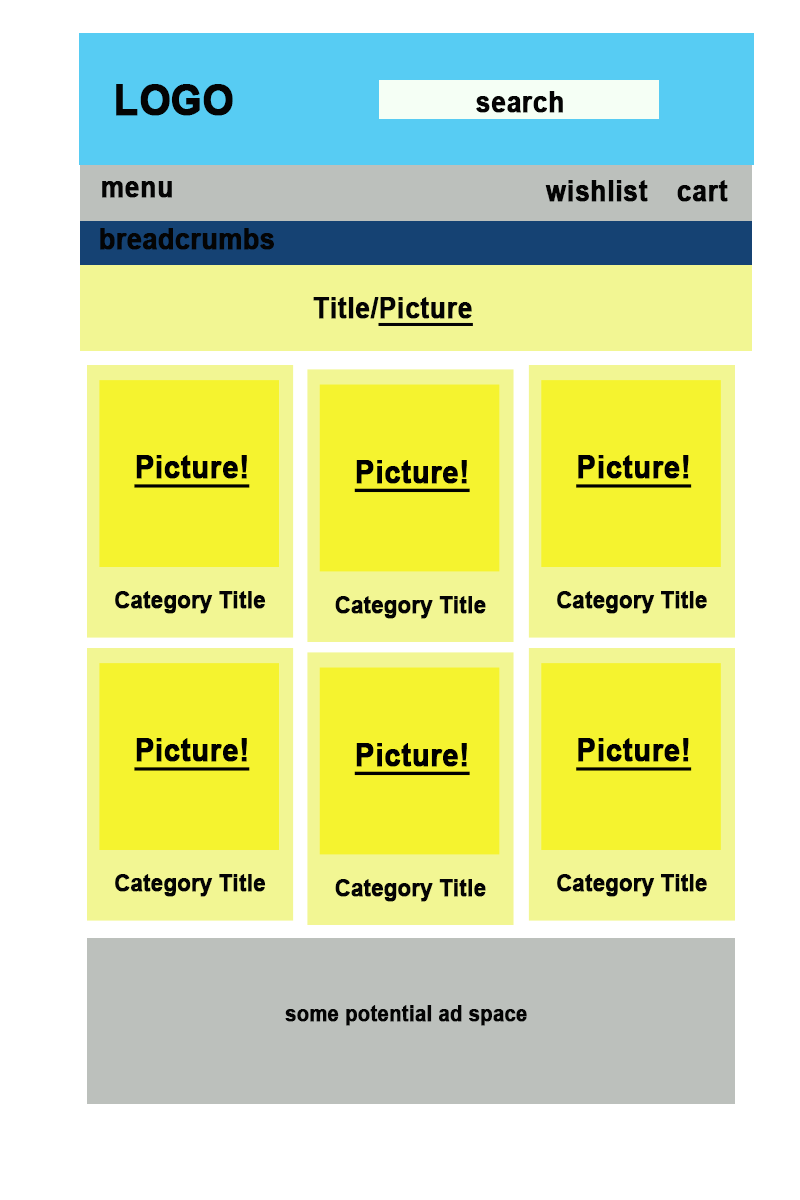
<style>
.page{position:relative;width:800px;height:1200px;background:#ffffff}
.page>*{position:absolute;margin:0}
.t1{font:43.2px "Arial-BoldMT";color:#040404;font-weight:bold;scale:0.92 1}
.t2{font:28.8px "Arial-BoldMT";color:#040404;font-weight:bold;scale:0.92 1}
.t3{font:28.9px "Arial-BoldMT";color:#040404;font-weight:bold;scale:0.92 1}
.t4{font:28.8px "Arial-BoldMT";color:#040404;font-weight:bold;text-decoration:underline;scale:0.92 1}
.t5{font:32px "Arial-BoldMT";color:#000000;font-weight:bold;text-decoration:underline;scale:0.91 1}
.t6{font:23.6px "Arial-BoldMT";color:#040404;font-weight:bold;scale:0.91 1}
.t7{font:21.6px "Arial-BoldMT";color:#040404;font-weight:bold;scale:0.92 1}
</style>
<div class="page">
<p class="t1" style="left:116px;top:84px;width:117px;height:32px">LOGO</p>
<p class="t2" style="left:476px;top:91px;width:87px;height:22px">search</p>
<p class="t2" style="left:102px;top:181px;width:70px;height:17px">menu</p>
<p class="t2" style="left:545px;top:180px;width:103px;height:22px">wishlist</p>
<p class="t2" style="left:677px;top:180px;width:51px;height:22px">cart</p>
<p class="t3" style="left:100px;top:228px;width:174px;height:22px">breadcrumbs</p>
<p class="t4" style="left:313px;top:297px;width:160px;height:29px"><span class="t2">Title/</span>Picture</p>
<p class="t5" style="left:134px;top:455px;width:116px;height:33px">Picture!</p>
<p class="t5" style="left:354px;top:460px;width:116px;height:33px">Picture!</p>
<p class="t5" style="left:576px;top:455px;width:116px;height:33px">Picture!</p>
<p class="t6" style="left:115px;top:591px;width:151px;height:23px">Category Title</p>
<p class="t6" style="left:557px;top:591px;width:150px;height:23px">Category Title</p>
<p class="t6" style="left:335px;top:596px;width:151px;height:23px">Category Title</p>
<p class="t5" style="left:134px;top:738px;width:116px;height:33px">Picture!</p>
<p class="t5" style="left:354px;top:743px;width:116px;height:33px">Picture!</p>
<p class="t5" style="left:576px;top:738px;width:116px;height:33px">Picture!</p>
<p class="t6" style="left:115px;top:874px;width:151px;height:23px">Category Title</p>
<p class="t6" style="left:335px;top:879px;width:151px;height:23px">Category Title</p>
<p class="t6" style="left:557px;top:874px;width:150px;height:23px">Category Title</p>
<p class="t7" style="left:285px;top:1005px;width:242px;height:21px">some potential ad space</p>
</div>
